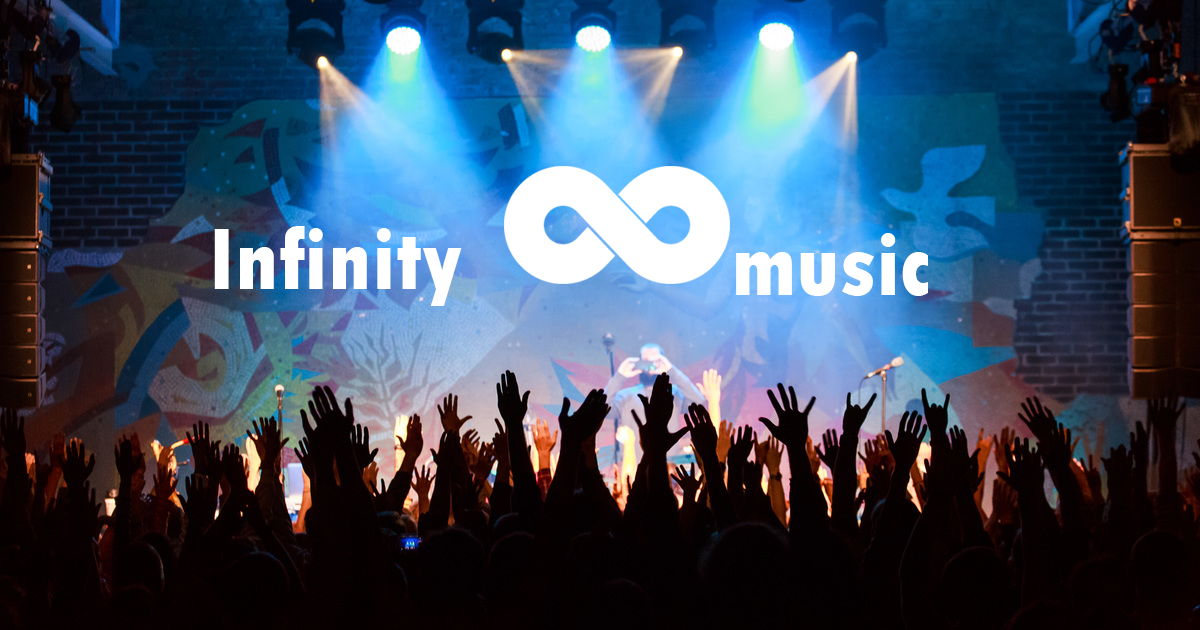
<style>
.page{position:relative;width:1200px;height:630px}
.page>*{position:absolute;margin:0}
.t1{font:92.2px "TwCenMT-CondensedExtraBold";color:#ffffff}
.t2{font:94px "TwCenMT-CondensedExtraBold";color:#ffffff}
</style>
<div class="page">
<p class="t1" style="left:214px;top:226px;width:248px;height:80px">Infinity</p>
<p class="t2" style="left:736px;top:233px;width:192px;height:63px">music</p>
</div>
